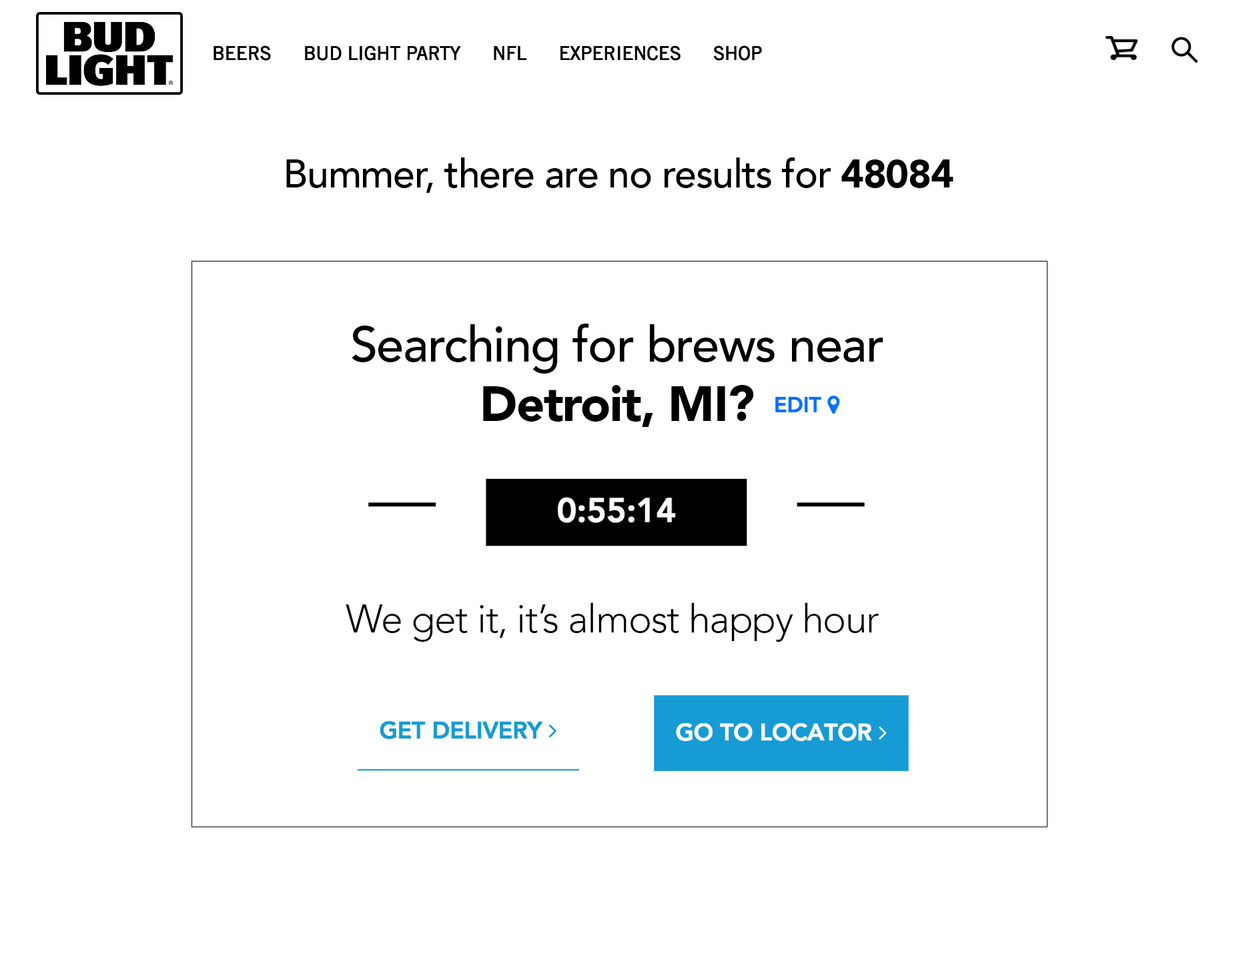
<style>
.page{position:relative;width:1239px;height:962px;background:#ffffff}
.page>*{position:absolute;margin:0}
.t1{font:39.2px "Avenir-Medium";letter-spacing:-0.02em;color:#000000}
.t2{font:39.2px "Avenir-Black";letter-spacing:-0.02em;color:#000000}
.t3{font:49.4px "Avenir-Medium";letter-spacing:-0.02em;color:#000000}
.t4{font:49.4px "Avenir-Black";letter-spacing:-0.02em;color:#000000}
.t5{font:39.1px "Avenir-Light";letter-spacing:-0.02em;color:#000000}
</style>
<div class="page">
<p class="t1" style="left:286px;top:157px;width:668px;height:36px">Bummer, there are no results for <span class="t2">48084</span></p>
<p class="t3" style="left:352px;top:324px;width:532px;height:103px;text-align:center">Searching for brews near<br><span class="t4">Detroit, MI?</span></p>
<p class="t5" style="left:346px;top:603px;width:533px;height:39px">We get it, it’s almost happy hour</p>
</div>
